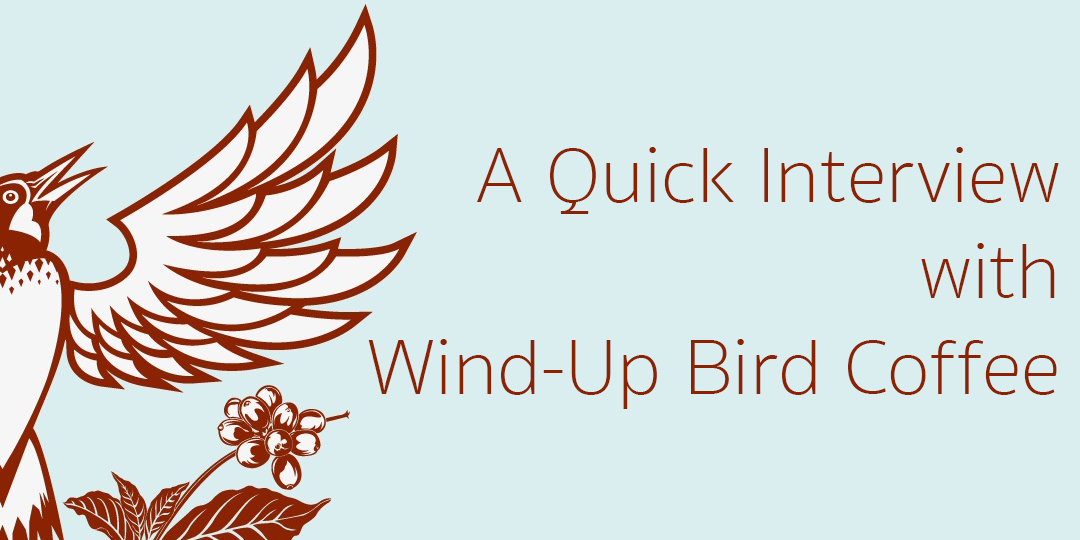
<style>
.page{position:relative;width:1080px;height:540px;background:#daeeef}
.page>*{position:absolute;margin:0}
.t1{font:80px "SukhumvitSet-Thin";color:#8b2202}
</style>
<div class="page">
<p class="t1" style="left:368px;top:147px;width:691px;height:262px;text-align:right">A Quick Interview<br>with<br>Wind-Up Bird Coffee</p>
</div>
